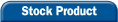
<style>
.page{position:relative;width:118px;height:22px;background:#005596}
.page>*{position:absolute;margin:0}
.t1{font:13px "FranklinGothic-DemiItal";color:#ffffff;scale:0.9 1}
</style>
<div class="page">
<p class="t1" style="left:21px;top:6px;width:76px;height:10px">Stock Product</p>
<p class="t1" style="left:21px;top:6px;width:76px;height:10px;opacity:0.5">Stock Product</p>
</div>
